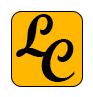
<style>
.page{position:relative;width:93px;height:97px;background:#ffb700}
.page>*{position:absolute;margin:0}
.t1{font:60px "ScriptMTBold";color:#000000}
</style>
<div class="page">
<p class="t1" style="left:16px;top:14px;width:38px;height:43px">L</p>
<p class="t1" style="left:41px;top:39px;width:34px;height:43px">C</p>
</div>
